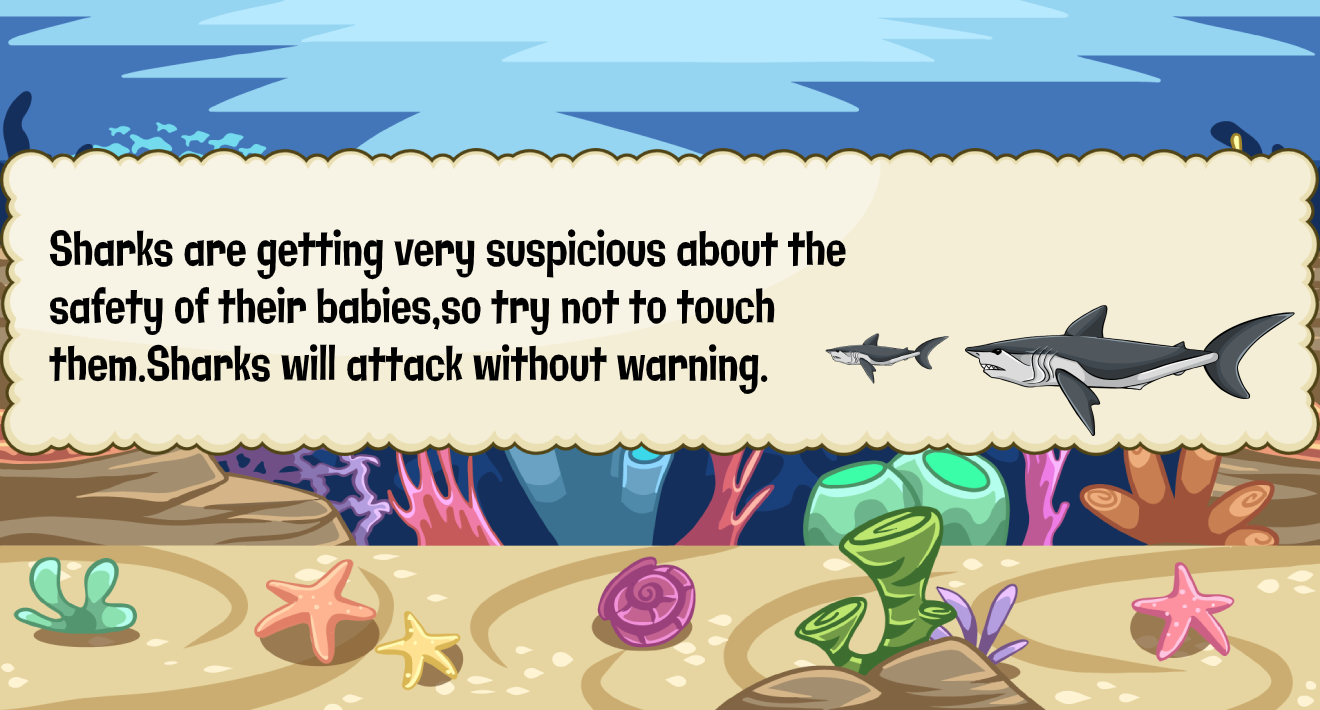
<style>
.page{position:relative;width:1320px;height:710px}
.page>*{position:absolute;margin:0}
.t1{font:47.9px "Galindo-Regular";color:#000000;scale:0.71 1}
</style>
<div class="page">
<p class="t1" style="left:49px;top:229px;width:797px;height:166px">Sharks are getting very suspicious about the <br>safety of their babies,so try not to touch <br>them.Sharks will attack without warning.</p>
</div>
